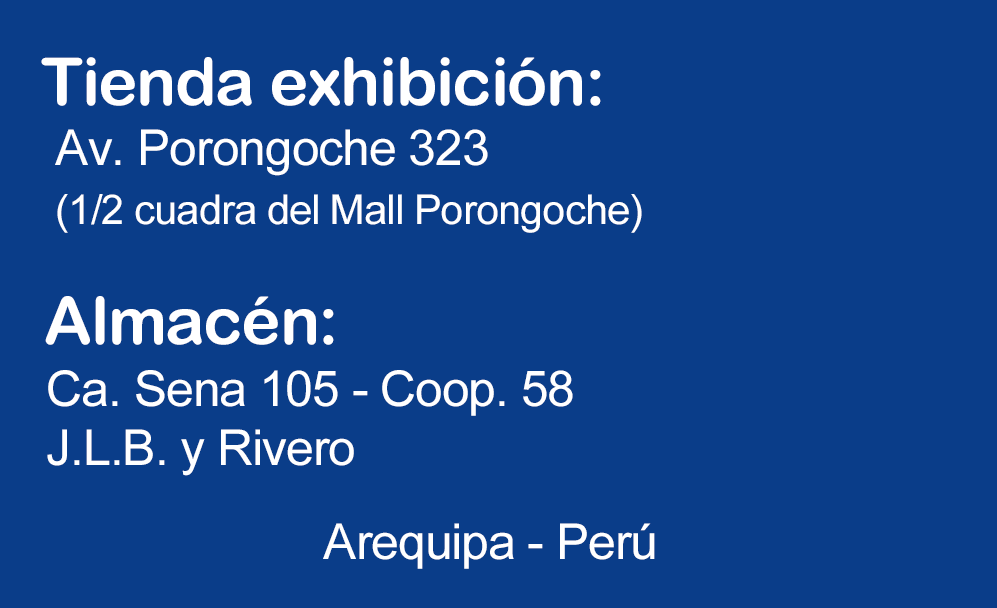
<style>
.page{position:relative;width:997px;height:608px;background:#0a3d89}
.page>*{position:absolute;margin:0}
.t1{font:66px "ArialRoundedMTBold";letter-spacing:-0.022em;color:#ffffff}
.t2{font:41.2px/58.3px "ArialMT";letter-spacing:-0.022em;color:#ffffff}
.t3{font:49.5px/58.3px "ArialMT";letter-spacing:-0.022em;color:#ffffff}
.t4{font:49.5px "ArialMT";letter-spacing:-0.022em;color:#ffffff}
</style>
<div class="page">
<p class="t1" style="left:41px;top:57px;width:560px;height:49px">Tienda exhibición:</p>
<p class="t2" style="left:55px;top:129px;width:587px;height:104px"><span class="t3">Av. Porongoche 323<br></span>(1/2 cuadra del Mall Porongoche)</p>
<p class="t1" style="left:45px;top:296px;width:289px;height:49px">Almacén:</p>
<p class="t3" style="left:47px;top:370px;width:526px;height:106px">Ca. Sena 105 - Coop. 58<br>J.L.B. y Rivero</p>
<p class="t4" style="left:323px;top:523px;width:332px;height:46px">Arequipa - Perú</p>
</div>
